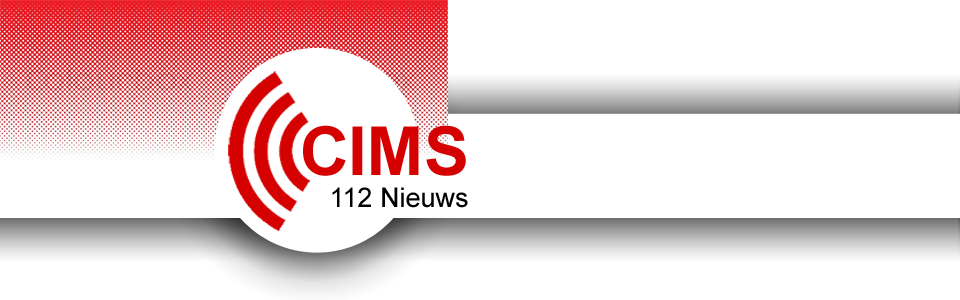
<style>
.page{position:relative;width:960px;height:300px;background:#ffffff}
.page>*{position:absolute;margin:0}
.t1{font:27px "ArialMT";color:#000000}
.t2{font:67.6px "Arial-BoldMT";color:#d50000}
</style>
<div class="page">
<p class="t1" style="left:303px;top:125px;width:165px;height:83px;text-align:right"><span class="t2">CIMS<br></span>112 Nieuws</p>
</div>
